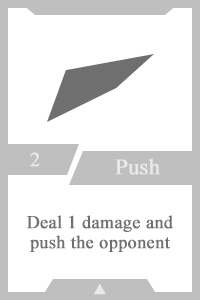
<style>
.page{position:relative;width:200px;height:300px;background:#ffffff}
.page>*{position:absolute;margin:0}
.t1{font:20px "TimesNewRomanPSMT";color:#e9e9e9;font-weight:bold}
.t2{font:22px "TimesNewRomanPSMT";color:#e9e9e9;font-weight:bold}
.t3{font:18px/20px "TimesNewRomanPSMT";color:#6f6f6f;font-weight:bold}
.t4{font:14px "AdobeHeitiStd-Regular";color:#e9e9e9;font-weight:bold}
</style>
<div class="page">
<p class="t1" style="left:30px;top:152px;width:10px;height:15px">2</p>
<p class="t2" style="left:115px;top:158px;width:46px;height:17px">Push</p>
<p class="t3" style="left:26px;top:215px;width:147px;height:37px;text-align:center">Deal 1 damage and push the opponent</p>
<p class="t4" style="left:94px;top:284px;width:12px;height:11px">▲</p>
</div>
